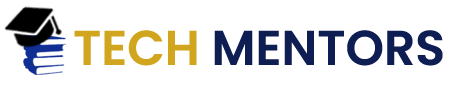
<style>
.page{position:relative;width:458px;height:93px;background:#ffffff}
.page>*{position:absolute;margin:0}
.t1{font:48.9px "Poppins-SemiBold";color:#0e1e53}
.t2{font:48.9px "Poppins-SemiBold";color:#d2a51d}
</style>
<div class="page">
<p class="t1" style="left:74px;top:30px;width:369px;height:36px"><span class="t2">TECH</span> MENTORS</p>
</div>
